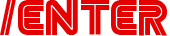
<style>
.page{position:relative;width:170px;height:36px;background:#e50000}
.page>*{position:absolute;margin:0}
.t1{font:41.7px "MrRobot";color:#e50000}
</style>
<div class="page">
<p class="t1" style="left:0px;top:0px;width:167px;height:36px">/ENTER</p>
</div>
